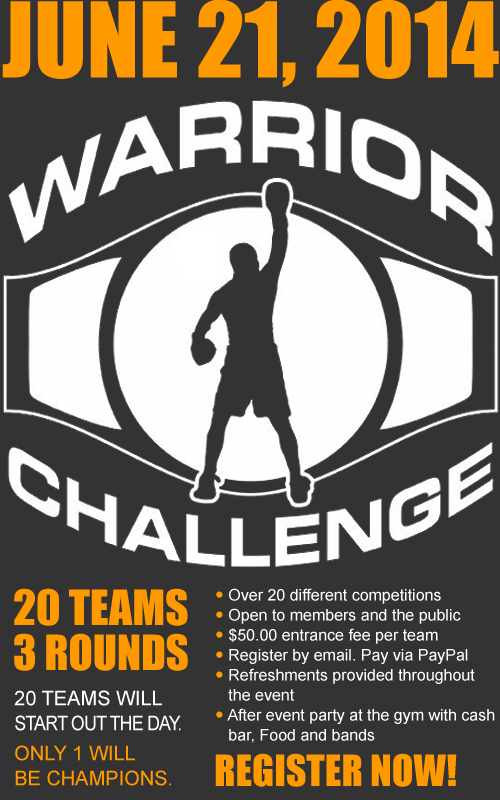
<style>
.page{position:relative;width:500px;height:800px;background:#333333}
.page>*{position:absolute;margin:0}
.t1{font:96.4px "Impact";color:#ff9900;text-transform:uppercase}
.t2{font:45px/45px "Impact";color:#ff9900;text-transform:uppercase}
.t3{font:16px/20px "ArialMT";color:#ffffff}
.t4{font:16px/20px "Wingdings2";color:#ff9900}
.t5{font:20px/25px "ArialMT";letter-spacing:-0.05em;color:#ffffff;text-transform:uppercase;scale:0.9 1}
.t6{font:20px/25px "ArialMT";color:#ffffff;text-transform:uppercase}
.t7{font:20px/20px "ArialMT";color:#ff9900;text-transform:uppercase}
.t8{font:20px/25px "ArialMT";color:#ff9900;text-transform:uppercase}
.t9{font:40px "Impact";color:#ff9900;text-transform:uppercase}
</style>
<div class="page">
<p class="t1" style="left:2px;top:0px;width:497px;height:88px">JUNE 21, 2014</p>
<p class="t2" style="left:14px;top:588px;width:174px;height:83px">20 teams<br>3 rounds</p>
<p class="t3" style="left:216px;top:588px;width:279px;height:155px"><span class="t4"> </span>Over 20 different competitions<br><span class="t4"> </span>Open to members and the public<br><span class="t4"> </span>$50.00 entrance fee per team<br><span class="t4"> </span>Register by email. Pay via PayPal<br><span class="t4"> </span>Refreshments provided throughout  <br>   the event<br><span class="t4"> </span>After event party at the gym with cash <br>   bar, Food and bands</p>
<p class="t5" style="left:14px;top:690px;width:167px;height:96px"><span class="t6">20 TEAMS WILL <br></span>START OUT THE DAY. <br><br><span class="t7">ONLY 1 will <br></span><span class="t8">be CHAMPIONS.</span></p>
<p class="t9" style="left:215px;top:753px;width:242px;height:34px">REGISTER NOW!</p>
</div>
